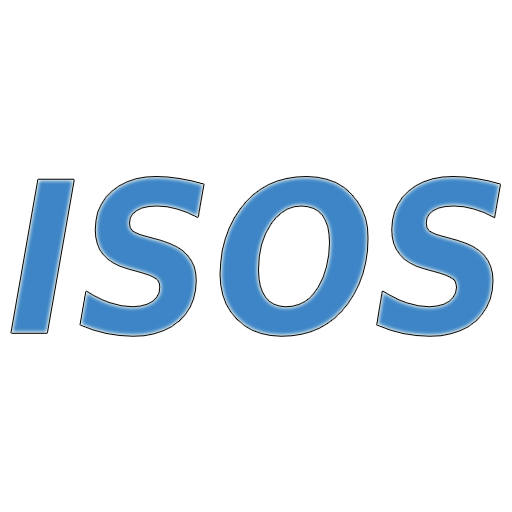
<style>
.page{position:relative;width:512px;height:512px;background:#ffffff}
.page>*{position:absolute;margin:0}
.t1{font:210px "DejaVuSansCondensed-BoldOblique";color:#3d85c6}
</style>
<div class="page">
<p class="t1" style="left:11px;top:176px;width:490px;height:160px">ISOS</p>
</div>
